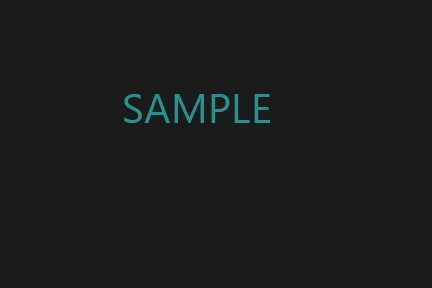
<style>
.page{position:relative;width:432px;height:288px;background:#1a1b1b}
.page>*{position:absolute;margin:0}
.t1{font:41.4px "LeelawadeeUI";color:#2a8f8f}
</style>
<div class="page">
<p class="t1" style="left:124px;top:94px;width:146px;height:29px">SAMPLE</p>
</div>
